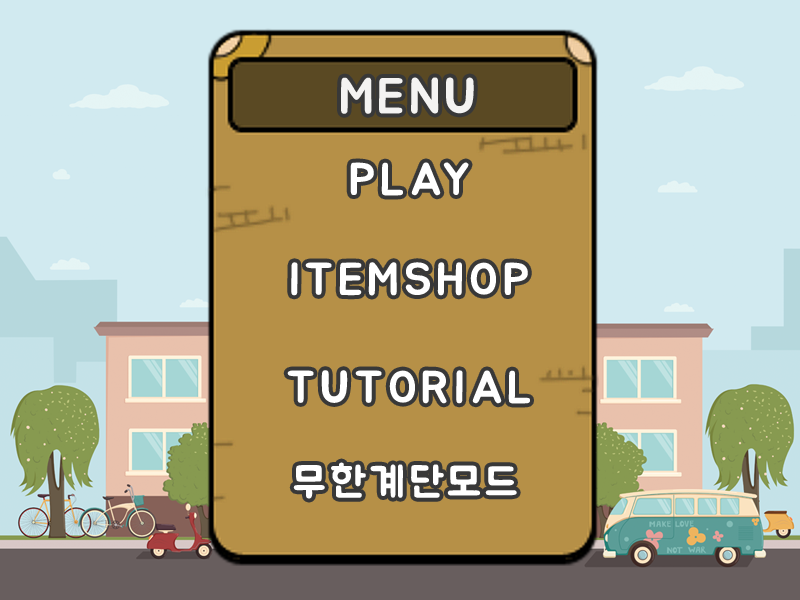
<style>
.page{position:relative;width:800px;height:600px;background:#d1eaf0}
.page>*{position:absolute;margin:0}
.t1{font:50px "BMJUA";letter-spacing:0.08em;color:#f4f3f2}
.t2{font:45.8px "BMJUA";letter-spacing:0.1em;color:#ffffff}
.t3{font:41.7px "BMJUA";letter-spacing:0.1em;color:#ffffff}
</style>
<div class="page">
<p class="t1" style="left:341px;top:77px;width:133px;height:37px">MENU</p>
<p class="t2" style="left:350px;top:162px;width:119px;height:34px">PLAY</p>
<p class="t2" style="left:291px;top:262px;width:237px;height:34px">ITEMSHOP</p>
<p class="t2" style="left:287px;top:370px;width:243px;height:34px">TUTORIAL</p>
<p class="t3" style="left:293px;top:462px;width:224px;height:37px">무한계단모드</p>
</div>
